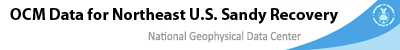
<style>
.page{position:relative;width:400px;height:50px;background:#ffffff}
.page>*{position:absolute;margin:0}
.t1{font:16.5px "MyriadPro-Bold";color:#000000}
</style>
<div class="page">
<p class="t1" style="left:10px;top:8px;width:328px;height:16px">OCM Data for Northeast U.S. Sandy Recovery</p>
</div>
